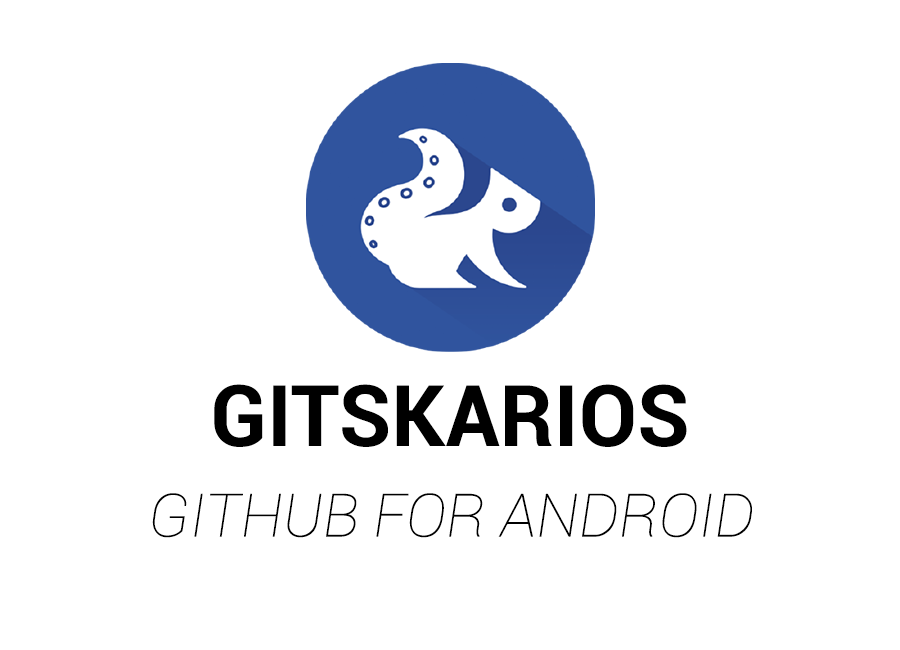
<style>
.page{position:relative;width:900px;height:650px;background:#ffffff}
.page>*{position:absolute;margin:0}
.t1{font:85px "Roboto-Bold";color:#000000}
.t2{font:60px "Roboto-ThinItalic";color:#000000}
</style>
<div class="page">
<p class="t1" style="left:214px;top:384px;width:473px;height:63px">GITSKARIOS</p>
<p class="t2" style="left:152px;top:493px;width:600px;height:45px">GITHUB FOR ANDROID</p>
</div>
